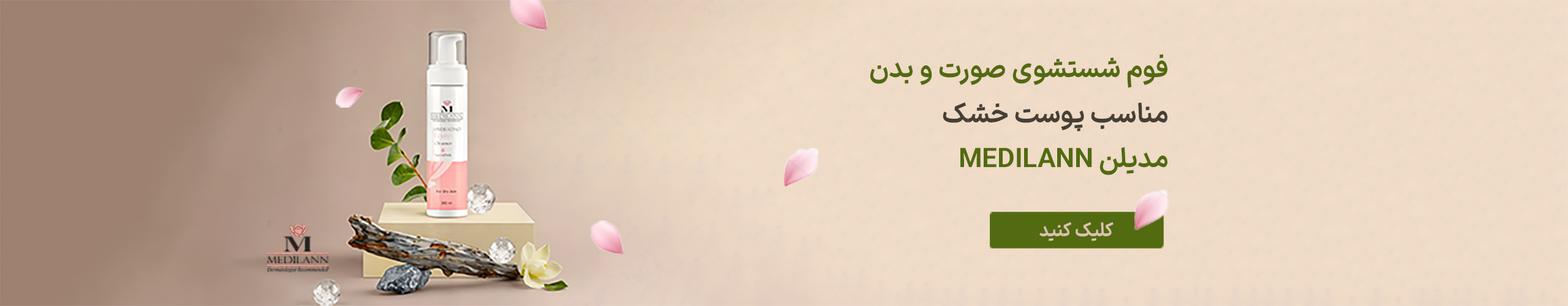
<style>
.page{position:relative;width:1568px;height:306px}
.page>*{position:absolute;margin:0}
.t1{font:27px/45px "IRANSansXFaNum-BoldD4";color:#526a10}
.t2{font:27px/45px "IRANSansXFaNum-BoldD4";color:#463f36}
.t3{font:19px "IRANSansXFaNum-BoldD4";color:#d9c2ae;scale:0.96 1}
</style>
<div class="page">
<p class="t1" style="left:870px;top:54px;width:297px;height:121px;text-align:right">فوم شستشوی صورت و بدن <br><span class="t2">مناسب پوست خشک<br></span>مدیلن MEDILANN</p>
<p class="t3" style="left:1039px;top:222px;width:75px;height:19px">کلیک کنید</p>
</div>
